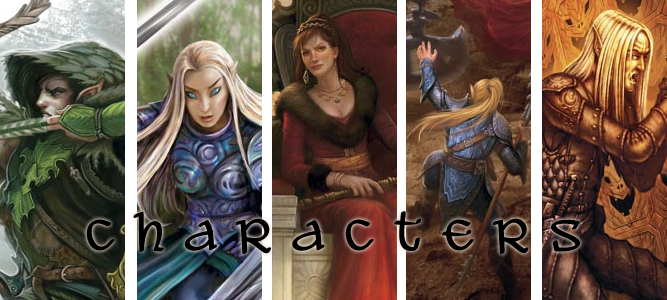
<style>
.page{position:relative;width:667px;height:300px}
.page>*{position:absolute;margin:0}
.t1{font:48px "AleandWenchesBB";color:#000000}
</style>
<div class="page">
<p class="t1" style="left:86px;top:211px;width:495px;height:44px">C h a r a c t e r s</p>
</div>
